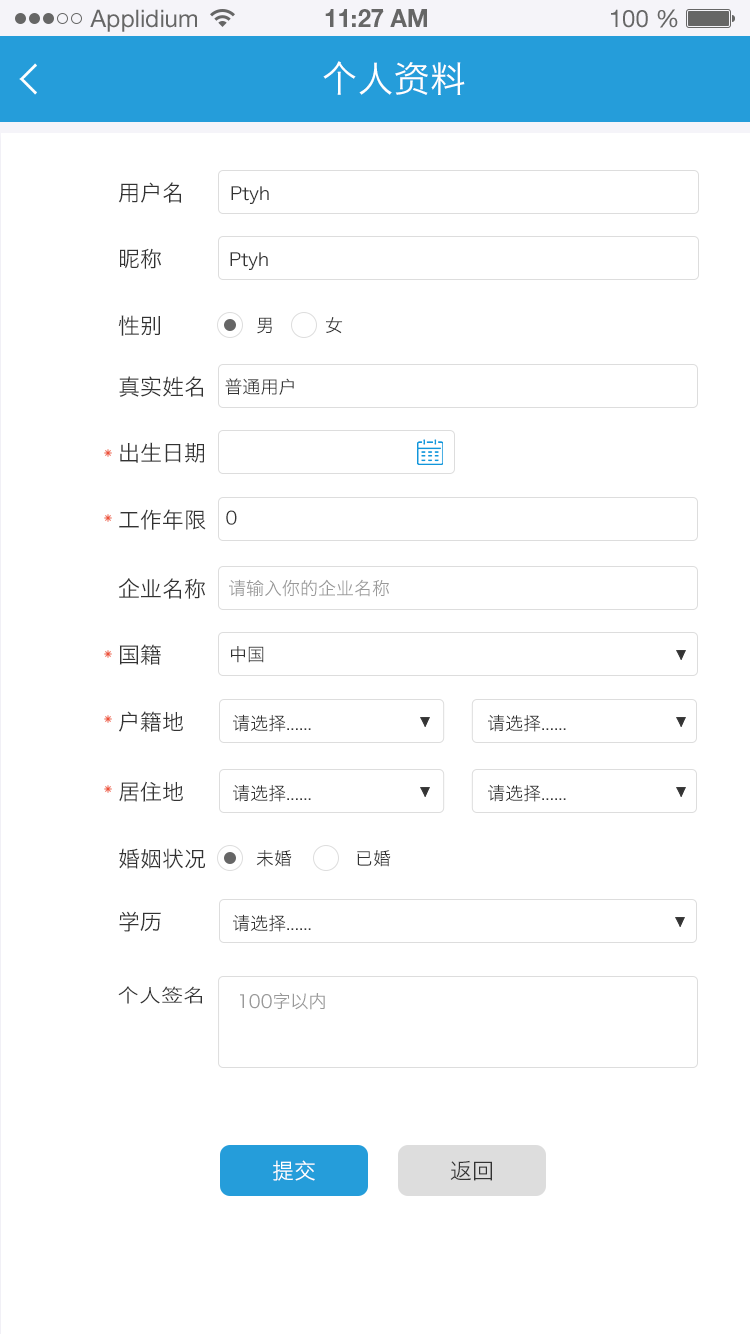
<style>
.page{position:relative;width:750px;height:1334px;background:#ffffff}
.page>*{position:absolute;margin:0}
.t1{font:24px "HelveticaNeueLTStd-Roman";color:#666666}
.t2{font:24px "HelveticaNeueLTStd-Bd";color:#666666}
.t3{font:36px "HiraginoSansGB-W3";color:#ffffff;text-transform:uppercase}
.t4{font:22px "HiraginoSansGB-W3";color:#333333;text-transform:uppercase}
.t5{font:18px "HiraginoSansGB-W3";color:#333333}
.t6{font:18px "HiraginoSansGB-W3";color:#333333;text-transform:uppercase}
.t7{font:18px "HiraginoSansGB-W3";color:#999999;text-transform:uppercase}
.t8{font:18.6px "HiraginoSansGB-W3";color:#333333;text-transform:uppercase;scale:1.18 1}
.t9{font:22px "HiraginoSansGB-W3";color:#ffffff;text-transform:uppercase}
</style>
<div class="page">
<p class="t1" style="left:90px;top:9px;width:107px;height:23px">Applidium</p>
<p class="t2" style="left:325px;top:9px;width:102px;height:18px">11:27 AM</p>
<p class="t1" style="left:611px;top:9px;width:67px;height:19px">100 %</p>
<p class="t3" style="left:323px;top:61px;width:142px;height:34px">个人资料</p>
<p class="t4" style="left:118px;top:182px;width:64px;height:21px">用户名</p>
<p class="t5" style="left:231px;top:186px;width:38px;height:18px"><span class="t6">p</span>tyh</p>
<p class="t4" style="left:120px;top:248px;width:41px;height:21px">昵称</p>
<p class="t5" style="left:230px;top:252px;width:38px;height:18px"><span class="t6">p</span>tyh</p>
<p class="t4" style="left:118px;top:315px;width:42px;height:21px">性别</p>
<p class="t6" style="left:257px;top:317px;width:15px;height:17px">男</p>
<p class="t6" style="left:326px;top:317px;width:17px;height:17px">女</p>
<p class="t4" style="left:119px;top:376px;width:85px;height:21px">真实姓名</p>
<p class="t6" style="left:225px;top:378px;width:69px;height:17px">普通用户</p>
<p class="t4" style="left:120px;top:442px;width:84px;height:21px">出生日期</p>
<p class="t4" style="left:119px;top:509px;width:87px;height:21px">工作年限</p>
<p class="t6" style="left:226px;top:510px;width:11px;height:15px">0</p>
<p class="t4" style="left:118px;top:578px;width:87px;height:21px">企业名称</p>
<p class="t7" style="left:229px;top:579px;width:160px;height:18px">请输入你的企业名称</p>
<p class="t4" style="left:119px;top:644px;width:42px;height:21px">国籍</p>
<p class="t6" style="left:231px;top:646px;width:33px;height:17px">中国</p>
<p class="t4" style="left:119px;top:711px;width:64px;height:21px">户籍地</p>
<p class="t6" style="left:233px;top:714px;width:78px;height:18px">请选择......</p>
<p class="t6" style="left:488px;top:714px;width:78px;height:18px">请选择......</p>
<p class="t4" style="left:119px;top:781px;width:64px;height:21px">居住地</p>
<p class="t6" style="left:233px;top:784px;width:78px;height:18px">请选择......</p>
<p class="t6" style="left:488px;top:784px;width:78px;height:18px">请选择......</p>
<p class="t4" style="left:119px;top:848px;width:86px;height:21px">婚姻状况</p>
<p class="t6" style="left:256px;top:850px;width:36px;height:17px">未婚</p>
<p class="t6" style="left:357px;top:850px;width:34px;height:17px">已婚</p>
<p class="t4" style="left:119px;top:911px;width:42px;height:21px">学历</p>
<p class="t6" style="left:233px;top:914px;width:78px;height:18px">请选择......</p>
<p class="t8" style="left:118px;top:986px;width:85px;height:18px">个人签名</p>
<p class="t7" style="left:240px;top:992px;width:85px;height:18px">100字以内</p>
<p class="t9" style="left:273px;top:1160px;width:42px;height:21px">提交</p>
<p class="t4" style="left:450px;top:1160px;width:42px;height:21px">返回</p>
</div>
